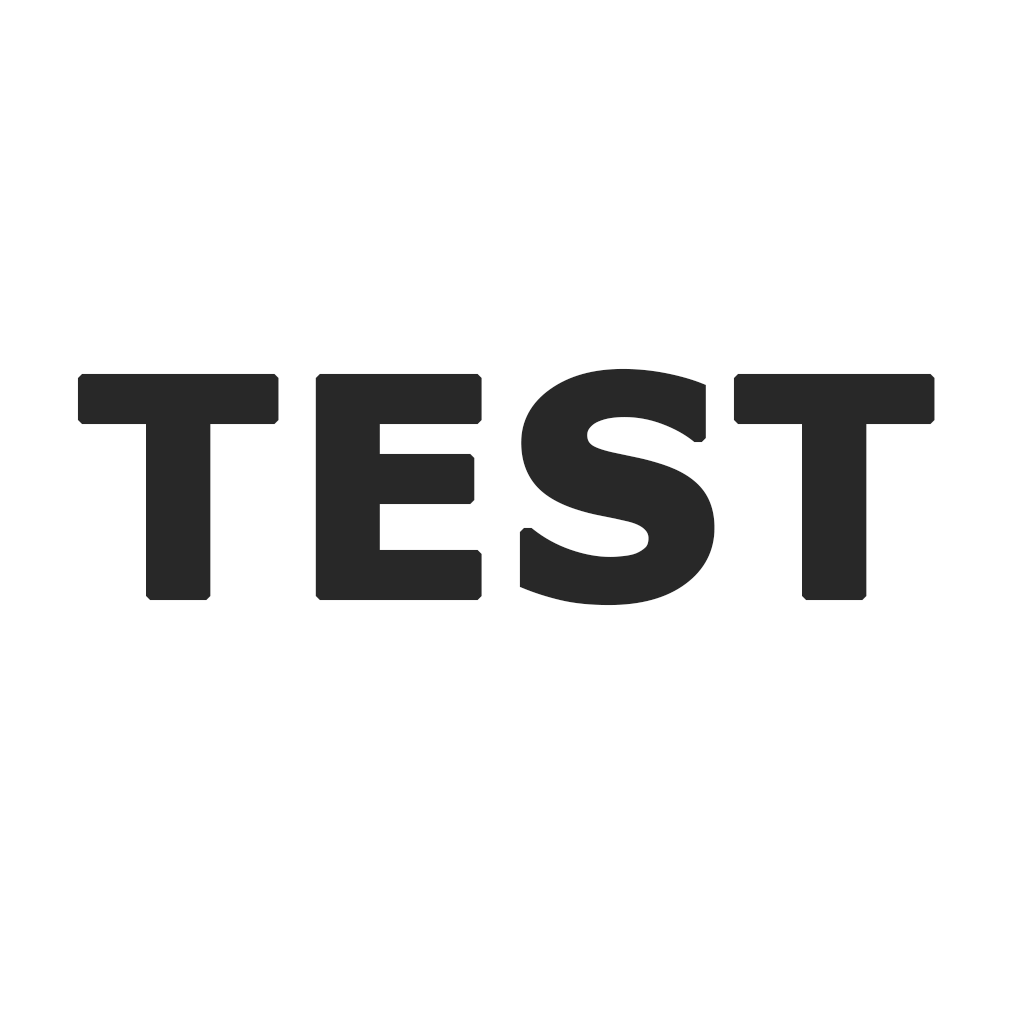
<style>
.page{position:relative;width:1024px;height:1024px;background:#ffffff}
.page>*{position:absolute;margin:0}
.t1{font:300px "Verdana-Bold";letter-spacing:0.01em;color:#282828;text-transform:uppercase;font-weight:bold}
</style>
<div class="page">
<p class="t1" style="left:77px;top:368px;width:858px;height:238px">TEST</p>
</div>
